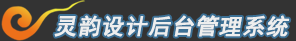
<style>
.page{position:relative;width:296px;height:41px;background:#333333}
.page>*{position:absolute;margin:0}
.t1{font:22px "SimHei";letter-spacing:0.04em;color:#eeeeee;font-weight:bold;font-style:italic}
</style>
<div class="page">
<p class="t1" style="left:54px;top:15px;width:236px;height:22px">灵韵设计后台管理系统</p>
</div>
